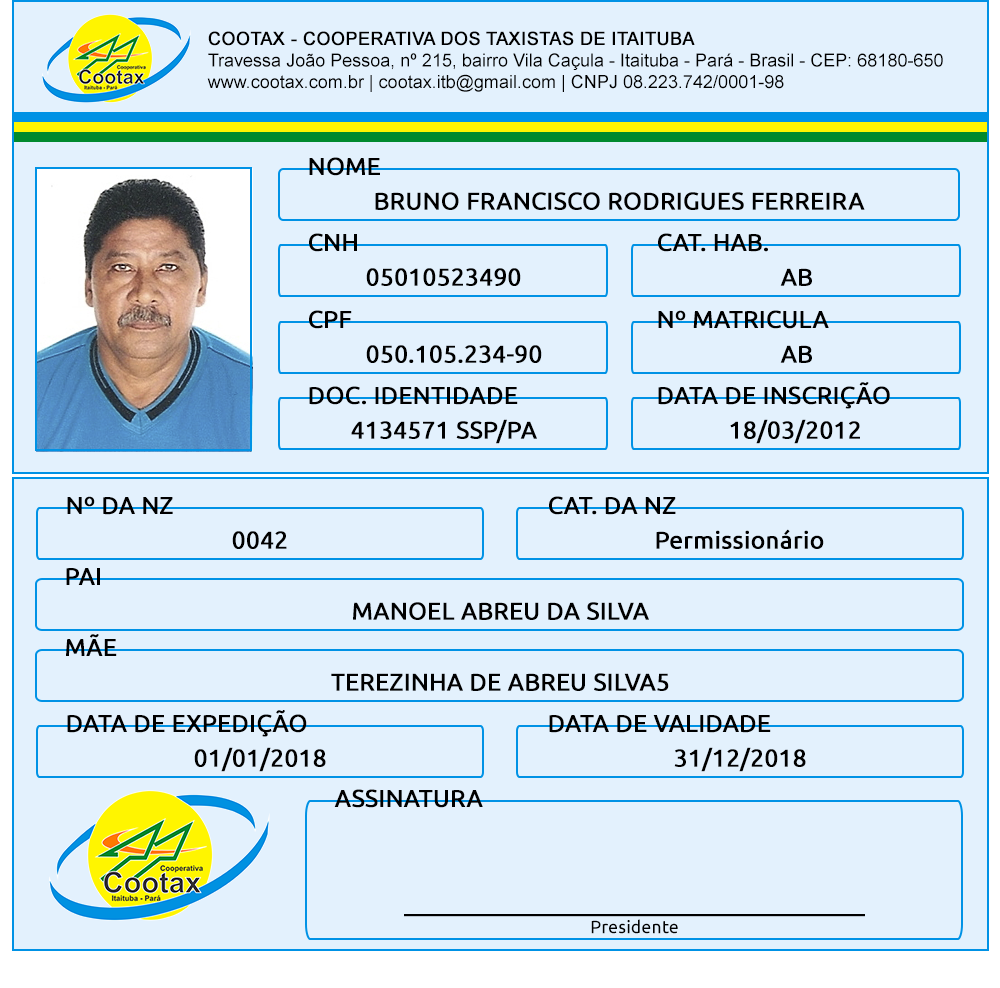
<style>
.page{position:relative;width:1000px;height:988px;background:#e3f1fd}
.page>*{position:absolute;margin:0}
.t1{font:18px "ArialMT";color:#000000}
.t2{font:18px "ArialMT";color:#000000;font-weight:bold}
.t3{font:24px "Ubuntu";color:#000000;text-transform:uppercase;font-weight:bold}
.t4{font:24px "Ubuntu";color:#000000;font-weight:bold}
.t5{font:18px "Ubuntu";color:#000000}
</style>
<div class="page">
<p class="t1" style="left:207px;top:31px;width:736px;height:61px"><span class="t2">COOTAX - COOPERATIVA DOS TAXISTAS DE ITAITUBA<br></span>Travessa João Pessoa, nº 215, bairro Vila Caçula - Itaituba - Pará - Brasil - CEP: 68180-650<br>www.cootax.com.br | cootax.itb@gmail.com | CNPJ 08.223.742/0001-98</p>
<p class="t3" style="left:309px;top:157px;width:71px;height:19px">Nome</p>
<p class="t4" style="left:375px;top:192px;width:490px;height:18px">BRUNO FRANCISCO RODRIGUES FERREIRA</p>
<p class="t4" style="left:309px;top:233px;width:48px;height:19px">CNH</p>
<p class="t4" style="left:658px;top:233px;width:110px;height:19px">CAT. HAB.</p>
<p class="t4" style="left:366px;top:268px;width:155px;height:18px">05010523490</p>
<p class="t4" style="left:780px;top:268px;width:32px;height:18px">AB</p>
<p class="t4" style="left:309px;top:310px;width:43px;height:19px">CPF</p>
<p class="t3" style="left:658px;top:310px;width:171px;height:19px">Nº Matricula</p>
<p class="t4" style="left:366px;top:345px;width:176px;height:18px">050.105.234-90</p>
<p class="t4" style="left:780px;top:345px;width:32px;height:18px">AB</p>
<p class="t4" style="left:309px;top:386px;width:209px;height:19px">DOC. IDENTIDADE</p>
<p class="t3" style="left:658px;top:382px;width:232px;height:27px">Data de Inscrição</p>
<p class="t4" style="left:351px;top:419px;width:186px;height:25px">4134571 SSP/PA</p>
<p class="t4" style="left:730px;top:419px;width:130px;height:25px">18/03/2012</p>
<p class="t4" style="left:67px;top:496px;width:106px;height:19px">Nº DA NZ</p>
<p class="t3" style="left:549px;top:496px;width:127px;height:19px">CAT. DA nz</p>
<p class="t4" style="left:232px;top:531px;width:55px;height:18px">0042</p>
<p class="t4" style="left:656px;top:529px;width:168px;height:20px">Permissionário</p>
<p class="t3" style="left:66px;top:568px;width:34px;height:17px">PAI</p>
<p class="t4" style="left:353px;top:602px;width:296px;height:18px">MANOEL ABREU DA SILVA</p>
<p class="t3" style="left:66px;top:634px;width:51px;height:22px">mÃE</p>
<p class="t4" style="left:331px;top:673px;width:338px;height:18px">TEREZINHA DE ABREU SILVA5</p>
<p class="t4" style="left:67px;top:710px;width:240px;height:27px">DATA DE EXPEDIÇÃO</p>
<p class="t3" style="left:549px;top:715px;width:222px;height:18px">data de validade</p>
<p class="t4" style="left:194px;top:747px;width:132px;height:25px">01/01/2018</p>
<p class="t4" style="left:674px;top:747px;width:132px;height:25px">31/12/2018</p>
<p class="t3" style="left:334px;top:789px;width:149px;height:19px">Assinatura</p>
<p class="t4" style="left:404px;top:914px;width:461px;height:20px;text-align:center">_____________________________________<br><span class="t5">Presidente</span></p>
</div>
